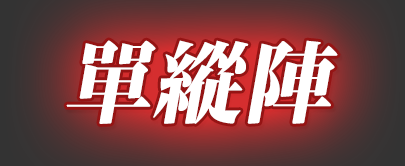
<style>
.page{position:relative;width:405px;height:166px}
.page>*{position:absolute;margin:0}
.t1{font:89px "KochoStd-Heavy";letter-spacing:0.005em;color:#ffffff;font-weight:bold;font-style:italic}
</style>
<div class="page">
<p class="t1" style="left:66px;top:40px;width:272px;height:84px">單縱陣</p>
</div>
